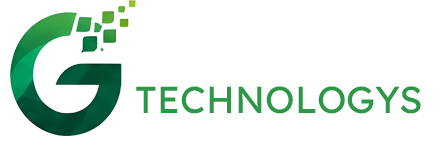
<style>
.page{position:relative;width:442px;height:145px;background:#ffffff}
.page>*{position:absolute;margin:0}
.t1{font:37.5px "ReadexPro-Regular";letter-spacing:0.005em;color:#2c9746}
</style>
<div class="page">
<p class="t1" style="left:136px;top:86px;width:285px;height:28px">TECHNOLOGYS</p>
</div>
